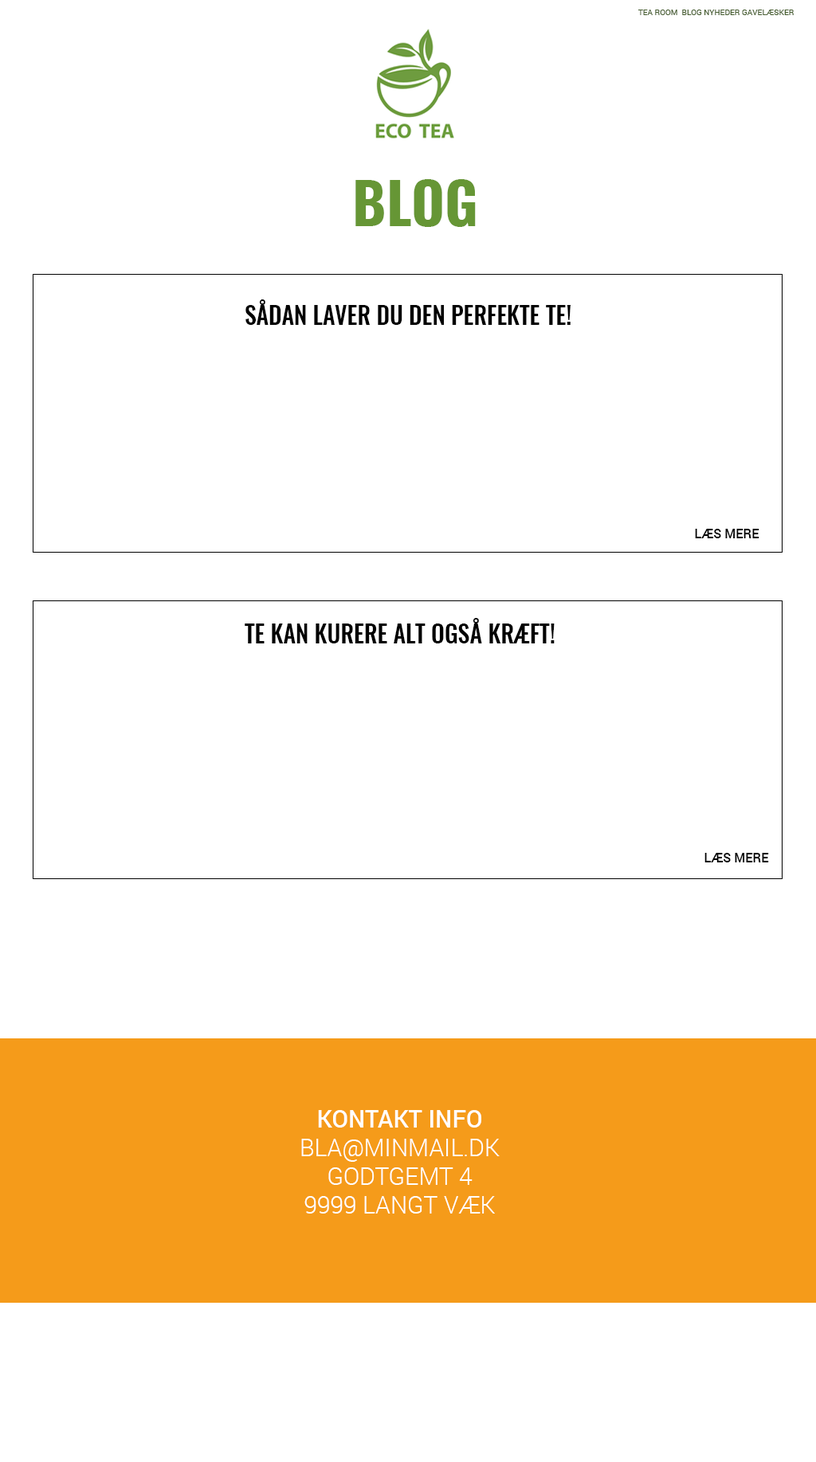
<style>
.page{position:relative;width:816px;height:1462px;background:#ffffff}
.page>*{position:absolute;margin:0}
.t1{font:8px "Roboto-Regular";color:#475e30}
.t2{font:57.3px "Oswald-Bold";color:#669635}
.t3{font:23.9px "Oswald-Medium";color:#000000}
.t4{font:12.7px "Roboto-Medium";color:#000000}
.t5{font:23.9px "Roboto-Light";color:#ffffff}
.t6{font:23.9px "Roboto-Medium";color:#ffffff}
</style>
<div class="page">
<p class="t1" style="left:638px;top:10px;width:155px;height:5px">TEA ROOM  BLOG NYHEDER GAVELÆSKER</p>
<p class="t2" style="left:355px;top:179px;width:120px;height:48px">BLOG</p>
<p class="t3" style="left:245px;top:299px;width:325px;height:26px">SÅDAN LAVER DU DEN PERFEKTE TE!</p>
<p class="t4" style="left:694px;top:529px;width:65px;height:9px">LÆS MERE</p>
<p class="t3" style="left:244px;top:618px;width:310px;height:25px">TE KAN KURERE ALT OGSÅ KRÆFT!</p>
<p class="t4" style="left:704px;top:853px;width:65px;height:9px">LÆS MERE</p>
<p class="t5" style="left:301px;top:1110px;width:198px;height:104px;text-align:center"><span class="t6">KONTAKT INFO<br></span>BLA@MINMAIL.DK<br>GODTGEMT 4<br>9999 LANGT VÆK</p>
</div>
